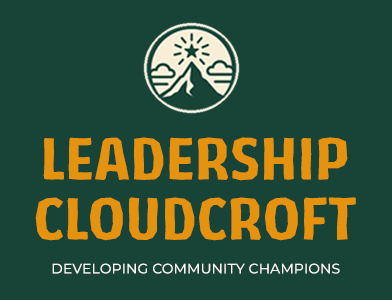
<style>
.page{position:relative;width:392px;height:300px;background:#184438}
.page>*{position:absolute;margin:0}
.t1{font:56px/60px "LosLanaNiuPro-Bold";letter-spacing:0.005em;color:#e5920f}
.t2{font:14px "Montserrat-Medium";letter-spacing:0.005em;color:#fdf9f9;font-weight:bold}
</style>
<div class="page">
<p class="t1" style="left:35px;top:137px;width:321px;height:104px;text-align:center">LEADERSHIP<br>CLOUDCROFT</p>
<p class="t2" style="left:52px;top:263px;width:288px;height:11px">DEVELOPING COMMUNITY CHAMPIONS</p>
</div>
